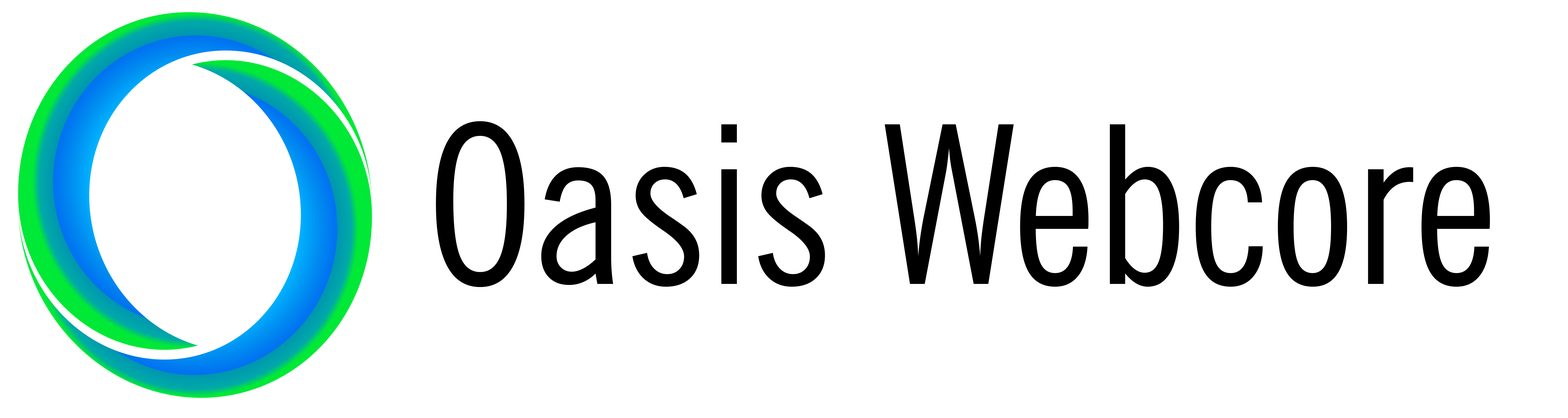
<style>
.page{position:relative;width:1568px;height:418px;background:#ffffff}
.page>*{position:absolute;margin:0}
.t1{font:220.6px "NewsGothicBT-RomanCondensed";color:#000000}
</style>
<div class="page">
<p class="t1" style="left:436px;top:121px;width:1054px;height:166px">Oasis Webcore</p>
</div>
